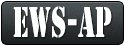
<style>
.page{position:relative;width:125px;height:46px;background:#fefffe}
.page>*{position:absolute;margin:0}
.t1{font:40px "StencilStd";color:#fefffe;scale:0.6 1}
</style>
<div class="page">
<p class="t1" style="left:13px;top:6px;width:99px;height:32px">EWS-AP</p>
</div>
